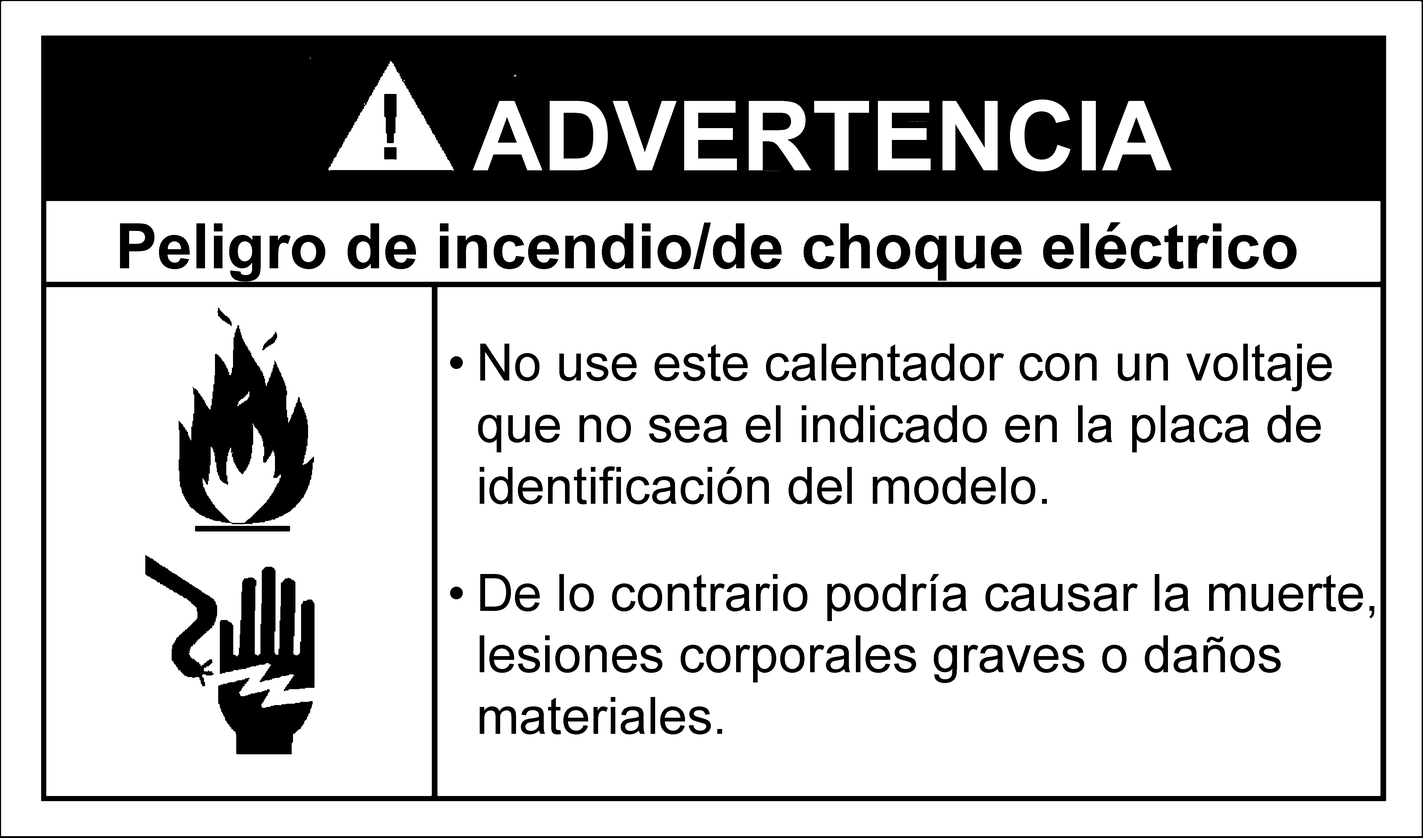
<style>
.page{position:relative;width:1423px;height:838px;background:#ffffff}
.page>*{position:absolute;margin:0}
.t1{font:96.8px "Arial-BoldMT";color:#ffffff}
.t2{font:62.6px "Arial-BoldMT";color:#000000}
.t3{font:51.3px "ArialMT";color:#000000}
</style>
<div class="page">
<p class="t1" style="left:473px;top:100px;width:699px;height:71px">ADVERTENCIA</p>
<p class="t2" style="left:120px;top:222px;width:1177px;height:59px">Peligro de incendio/de choque eléctrico</p>
<p class="t3" style="left:450px;top:344px;width:924px;height:390px;text-align:justify">•  No use este calentador con un voltaje       que no sea el indicado en la placa de         identificación del modelo.<br>•  De lo contrario podría causar la muerte,     lesiones corporales graves o daños             materiales.</p>
</div>
